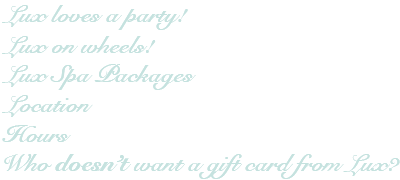
<style>
.page{position:relative;width:400px;height:180px;background:#ffffff}
.page>*{position:absolute;margin:0}
.t1{font:24px "SnellRoundhand-Bold";color:#c5e2df}
.t2{font:24px "SnellRoundhand-Black";color:#c5e2df}
</style>
<div class="page">
<p class="t1" style="left:2px;top:5px;width:186px;height:25px">Lux loves a party!</p>
<p class="t1" style="left:2px;top:5px;width:186px;height:25px">Lux loves a party!</p>
<p class="t1" style="left:2px;top:36px;width:154px;height:22px">Lux on wheels!</p>
<p class="t1" style="left:2px;top:36px;width:154px;height:22px">Lux on wheels!</p>
<p class="t1" style="left:2px;top:64px;width:194px;height:26px">Lux Spa Packages</p>
<p class="t1" style="left:2px;top:64px;width:194px;height:26px">Lux Spa Packages</p>
<p class="t1" style="left:2px;top:95px;width:91px;height:22px">Location</p>
<p class="t1" style="left:2px;top:95px;width:91px;height:22px">Location</p>
<p class="t1" style="left:2px;top:125px;width:69px;height:17px">Hours</p>
<p class="t1" style="left:2px;top:125px;width:69px;height:17px">Hours</p>
<p class="t1" style="left:4px;top:154px;width:396px;height:25px">Who <span class="t2">doesn’t</span> want a gift card from Lux?</p>
<p class="t1" style="left:4px;top:154px;width:396px;height:25px">Who <span class="t2">doesn’t</span> want a gift card from Lux?</p>
</div>
